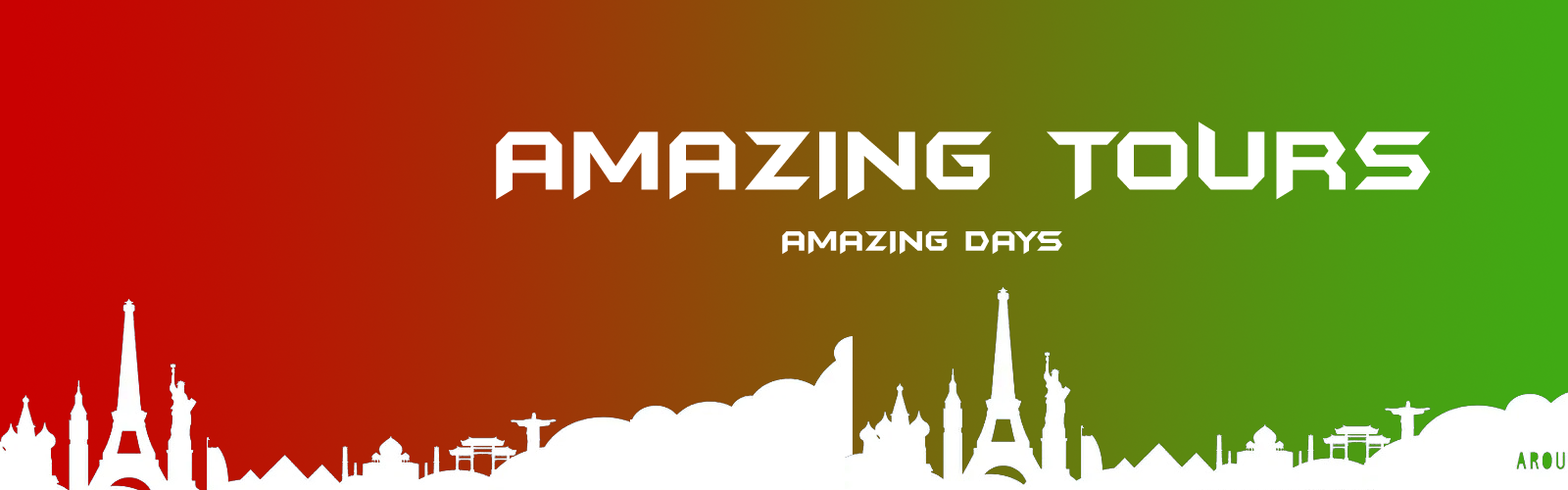
<style>
.page{position:relative;width:1568px;height:490px}
.page>*{position:absolute;margin:0}
.t1{font:98px "BatmanForeverAlternate";color:#ffffff;scale:0.94 1}
.t2{font:32.7px "BatmanForeverAlternate";color:#ffffff;scale:0.94 1}
</style>
<div class="page">
<p class="t1" style="left:496px;top:122px;width:935px;height:78px">AMAZING TOURS</p>
<p class="t2" style="left:782px;top:231px;width:280px;height:24px">AMAZING DAYS</p>
</div>
